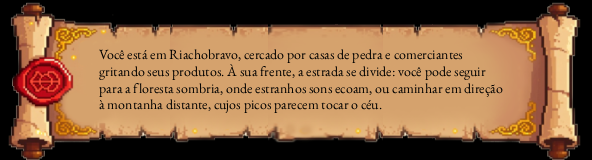
<style>
.page{position:relative;width:592px;height:160px;background:#000000}
.page>*{position:absolute;margin:0}
.t1{font:14px "EBGaramond12-Regular";color:#000000}
</style>
<div class="page">
<p class="t1" style="left:99px;top:49px;width:404px;height:65px">Você está em Riachobravo, cercado por casas de pedra e comerciantes gritando seus produtos. À sua frente, a estrada se divide: você pode seguir para a floresta sombria, onde estranhos sons ecoam, ou caminhar em direção à montanha distante, cujos picos parecem tocar o céu.</p>
</div>
